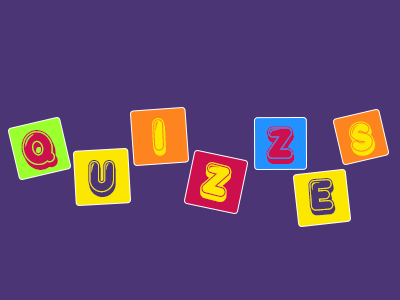
<style>
.page{position:relative;width:400px;height:300px;background:#4c3575}
.page>*{position:absolute;margin:0}
.t1{font:53.2px "Reglisse";letter-spacing:-0.05em;color:#fce700}
.t2{font:53.3px "Reglisse";letter-spacing:-0.05em;color:#cd104d}
.t3{font:46.9px "Reglisse";letter-spacing:-0.05em;color:#fce700}
.t4{font:55.7px "Reglisse";letter-spacing:-0.05em;color:#cd104d}
.t5{font:52.1px "Reglisse";letter-spacing:-0.05em;color:#4c3575}
.t6{font:52px "Reglisse";letter-spacing:-0.05em;color:#fce700}
.t7{font:51.5px "Reglisse";letter-spacing:-0.05em;color:#4c3575}
</style>
<div class="page">
<p class="t1" style="left:152px;top:118px;width:14px;height:38px;rotate:-3deg">I</p>
<p class="t2" style="left:266px;top:126px;width:29px;height:38px">Z</p>
<p class="t3" style="left:349px;top:121px;width:27px;height:35px;rotate:-12deg">S</p>
<p class="t4" style="left:21px;top:130px;width:37px;height:40px;rotate:-14deg">Q</p>
<p class="t5" style="left:88px;top:160px;width:28px;height:37px">U</p>
<p class="t6" style="left:200px;top:162px;width:32px;height:40px;rotate:14deg">Z</p>
<p class="t7" style="left:308px;top:178px;width:28px;height:38px;rotate:-4deg">E</p>
</div>
